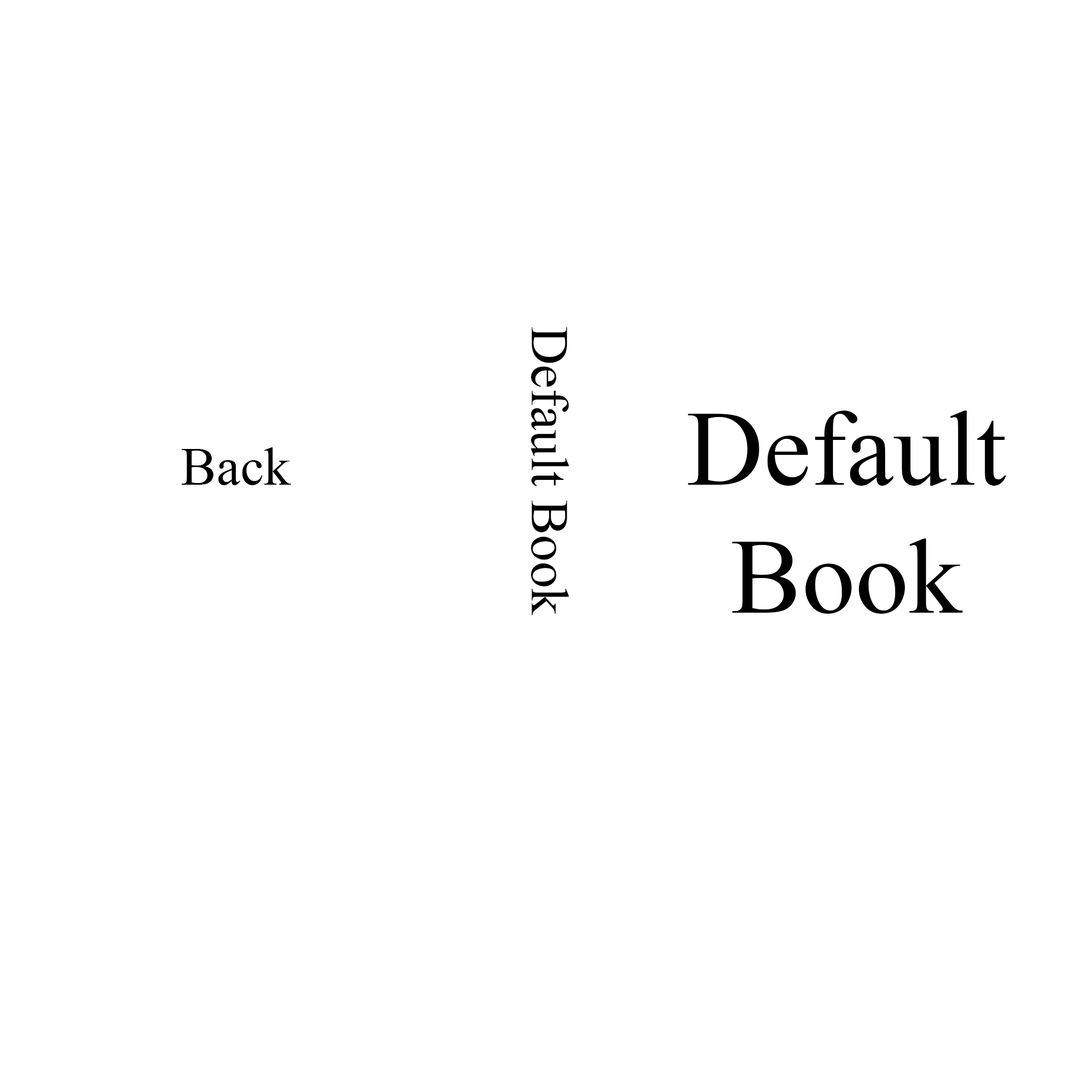
<style>
.page{position:relative;width:1092px;height:1092px;background:#ffffff}
.page>*{position:absolute;margin:0}
.t1{font:53.3px "TimesNewRomanPSMT";color:#000000}
.t2{font:106.6px "TimesNewRomanPSMT";color:#000000}
</style>
<div class="page">
<p class="t1" style="left:531px;top:327px;width:38px;height:288px;rotate:90deg">Default Book</p>
<p class="t2" style="left:688px;top:411px;width:318px;height:203px;text-align:center">Default<br>Book</p>
<p class="t1" style="left:181px;top:447px;width:110px;height:38px">Back</p>
</div>
